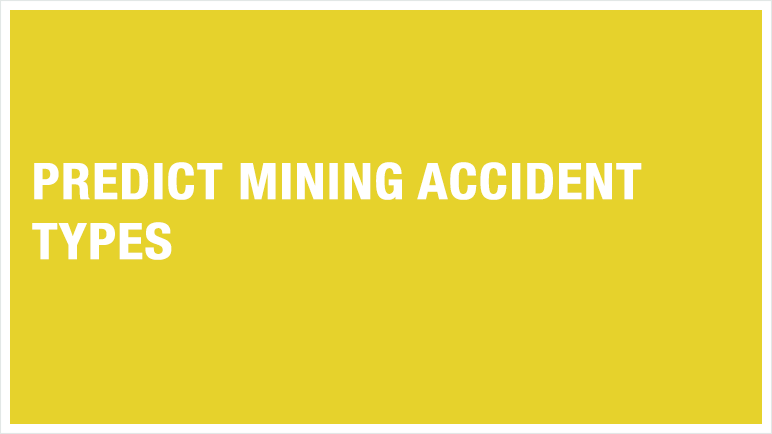
<style>
.page{position:relative;width:772px;height:434px;background:#e6d22c}
.page>*{position:absolute;margin:0}
.t1{font:50px "HelveticaNeue-CondensedBold";color:#ffffff;font-weight:bold;scale:1.07 1}
</style>
<div class="page">
<p class="t1" style="left:32px;top:162px;width:610px;height:98px">PREDICT MINING ACCIDENT <br>TYPES</p>
</div>
